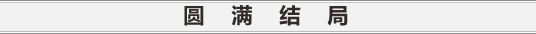
<style>
.page{position:relative;width:536px;height:34px;background:#f2f2f2}
.page>*{position:absolute;margin:0}
.t1{font:21.3px "MicrosoftYaHei-Bold";color:#312c29}
</style>
<div class="page">
<p class="t1" style="left:184px;top:5px;width:164px;height:21px">圆满结局</p>
</div>
